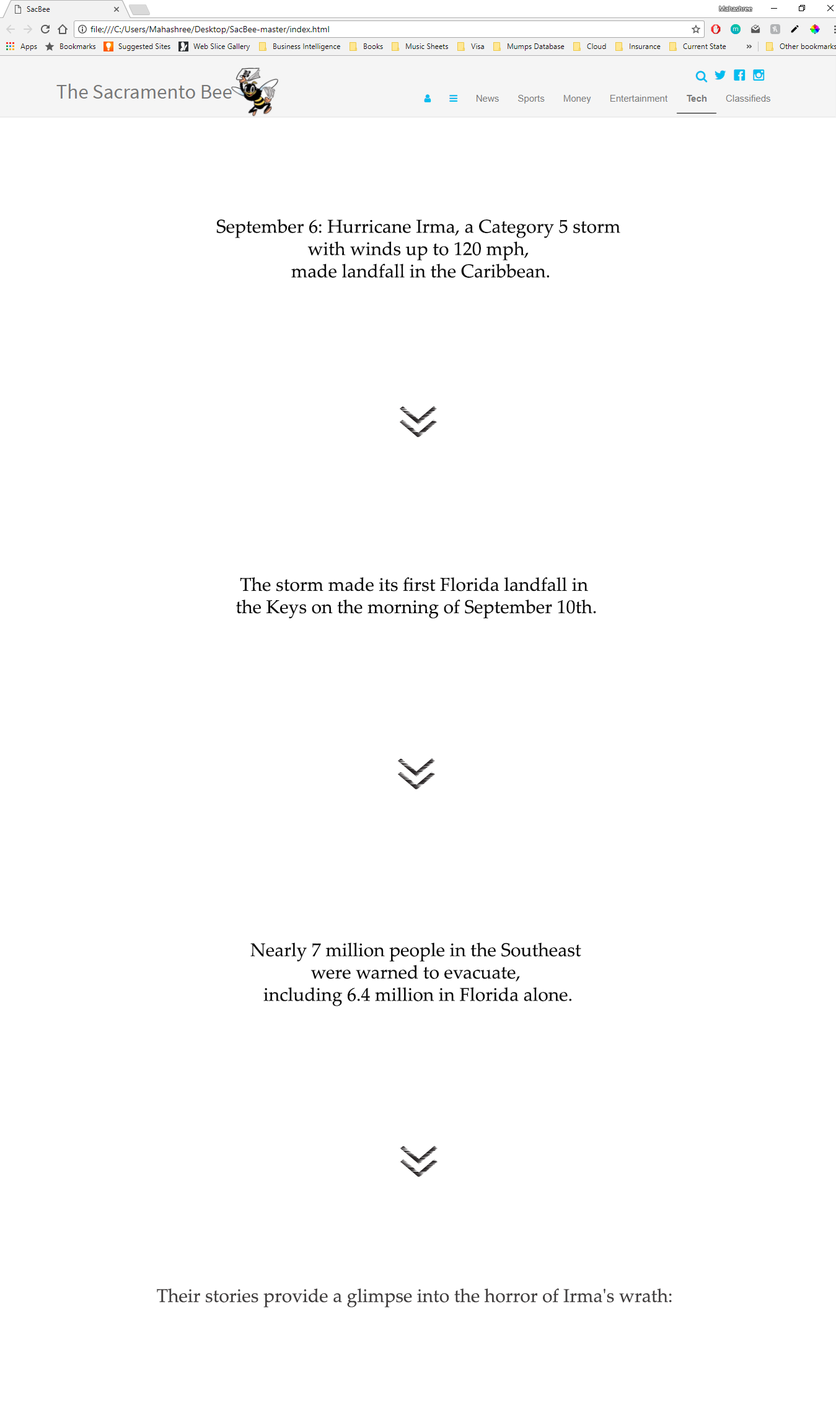
<style>
.page{position:relative;width:836px;height:1426px;background:#ffffff}
.page>*{position:absolute;margin:0}
.t1{font:18.6px "PalatinoLinotype-Roman";color:#0a0a0a}
.t2{font:18.6px "PalatinoLinotype-Roman";color:#413e3e}
</style>
<div class="page">
<p class="t1" style="left:216px;top:219px;width:405px;height:59px;text-align:center">September 6: Hurricane Irma, a Category 5 storm <br>with winds up to 120 mph, <br>made landfall in the Caribbean.</p>
<p class="t1" style="left:236px;top:577px;width:360px;height:42px;text-align:center">The storm made its first Florida landfall in <br>the Keys on the morning of September 10th.</p>
<p class="t1" style="left:250px;top:942px;width:332px;height:64px;text-align:center">Nearly 7 million people in the Southeast <br>were warned to evacuate, <br>including 6.4 million in Florida alone.</p>
<p class="t2" style="left:157px;top:1288px;width:515px;height:19px">Their stories provide a glimpse into the horror of Irma's wrath:</p>
</div>
